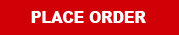
<style>
.page{position:relative;width:179px;height:35px;background:#d10006}
.page>*{position:absolute;margin:0}
.t1{font:27.8px "Arial-Black";color:#ffffff;scale:0.9 1}
</style>
<div class="page">
<p class="t1" style="left:31px;top:11px;width:115px;height:12px">PLACE ORDER</p>
</div>
